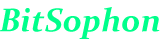
<style>
.page{position:relative;width:161px;height:40px;background:#ffffff}
.page>*{position:absolute;margin:0}
.t1{font:33px "Constantia-BoldItalic";color:#00ff8b}
</style>
<div class="page">
<p class="t1" style="left:0px;top:7px;width:160px;height:32px">BitSophon</p>
</div>
